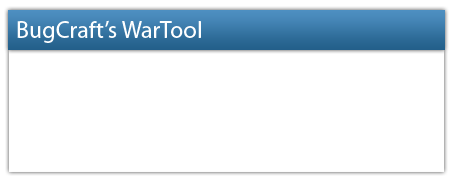
<style>
.page{position:relative;width:454px;height:183px;background:#ffffff}
.page>*{position:absolute;margin:0}
.t1{font:24px "MyriadPro-Regular";color:#ffffff}
</style>
<div class="page">
<p class="t1" style="left:17px;top:20px;width:184px;height:23px">BugCraft’s WarTool</p>
</div>
